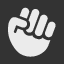
<style>
.page{position:relative;width:64px;height:64px;background:#333333}
.page>*{position:absolute;margin:0}
.t1{font:74px "SegoeUISymbol";color:#ffffff}
</style>
<div class="page">
<p class="t1" style="left:8px;top:7px;width:48px;height:50px;rotate:20deg;opacity:0.9">✊</p>
</div>
